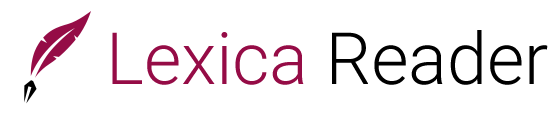
<style>
.page{position:relative;width:559px;height:117px;background:#ffffff}
.page>*{position:absolute;margin:0}
.t1{font:72px "Roboto-Light";color:#950c46}
.t2{font:72px "Roboto-Light";color:#000000}
</style>
<div class="page">
<p class="t1" style="left:112px;top:30px;width:436px;height:55px">Lexica <span class="t2">Reader</span></p>
</div>
